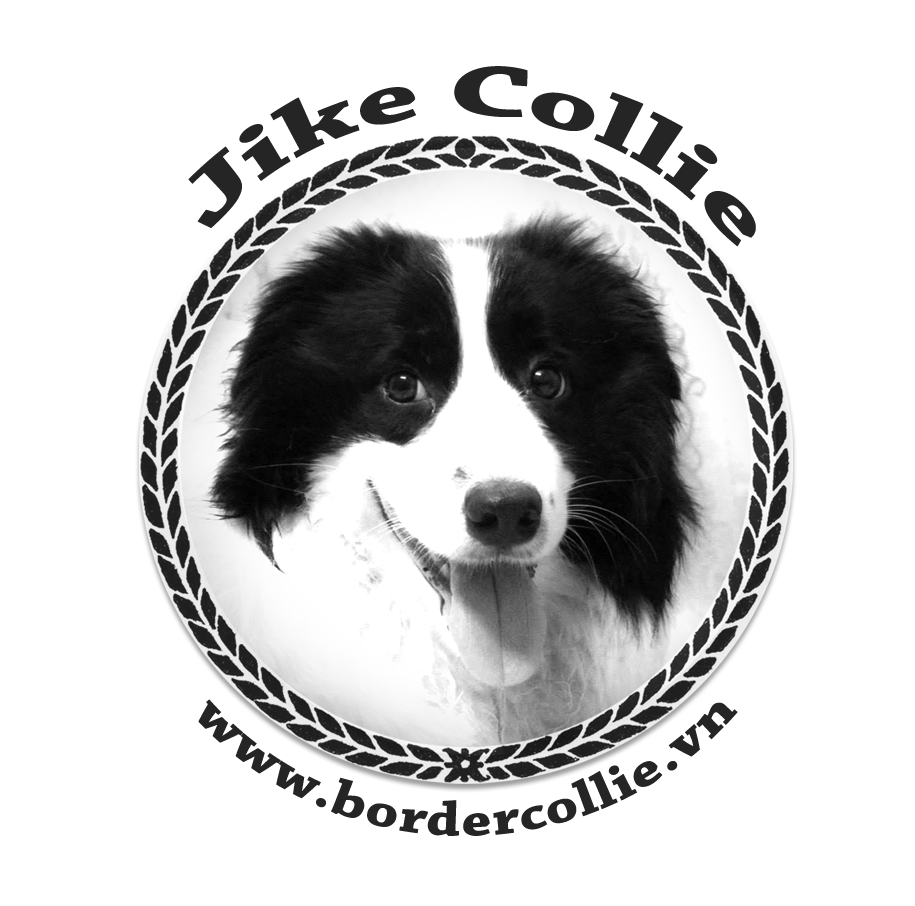
<style>
.page{position:relative;width:915px;height:906px;background:#ffffff}
.page>*{position:absolute;margin:0}
.t1{font:75px "ChaparralPro-Bold";color:#252525}
.t2{font:51.4px "ChaparralPro-Bold";color:#252525}
</style>
<div class="page">
<p class="t1" style="left:188px;top:66px;width:568px;height:181px;rotate:2deg">Jike Collie</p>
<p class="t2" style="left:198px;top:699px;width:540px;height:137px">www.bordercollie.vn</p>
</div>
